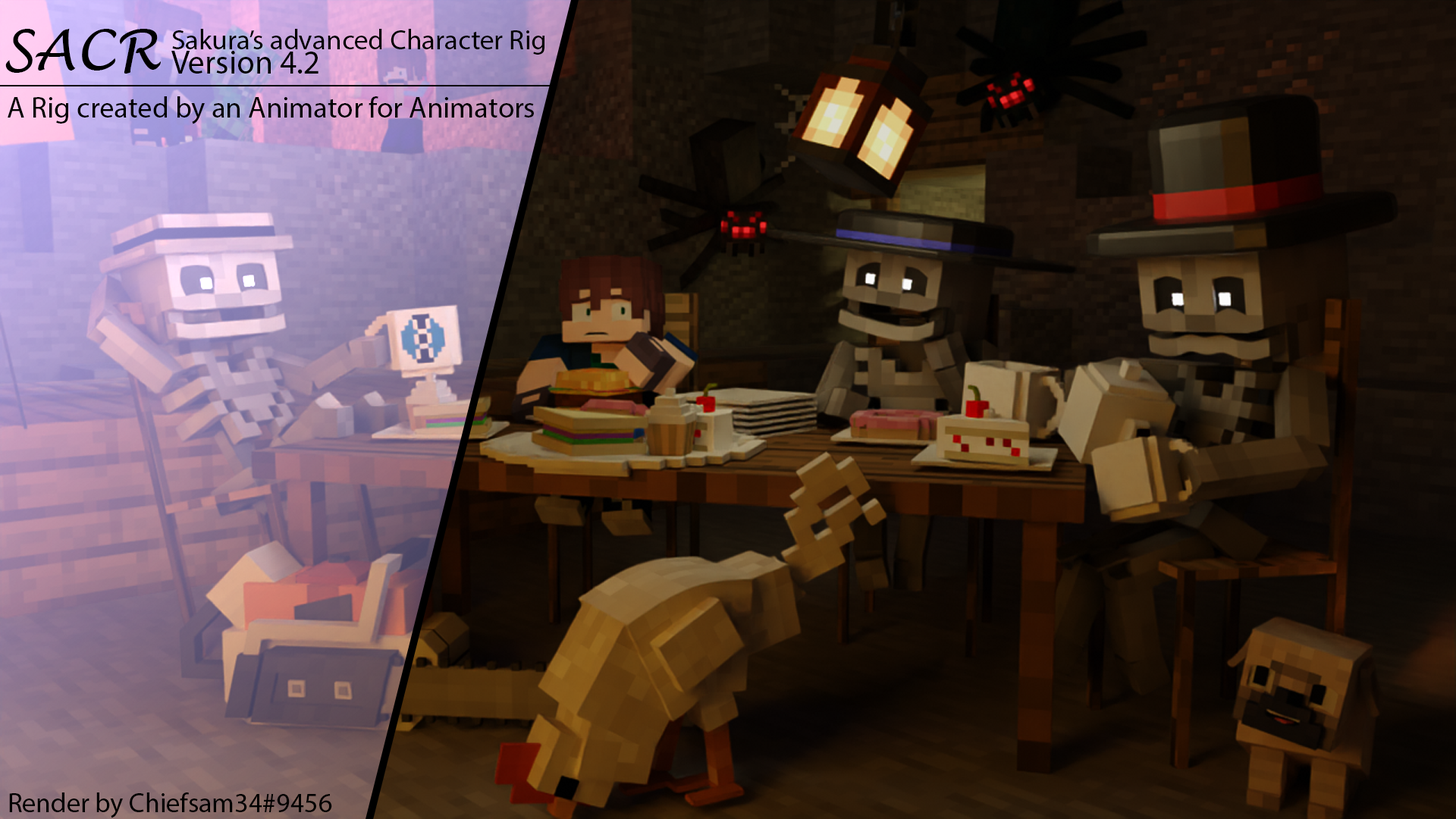
<style>
.page{position:relative;width:1456px;height:819px}
.page>*{position:absolute;margin:0}
.t1{font:55.4px "LucidaHandwriting-Italic";color:#000000}
.t2{font:28.1px "MyriadPro-Regular";color:#000000}
.t3{font:33px "MyriadPro-Regular";color:#000000}
.t4{font:29.3px "MyriadPro-Regular";color:#000000}
.t5{font:27.3px "MyriadPro-Regular";color:#000000}
</style>
<div class="page">
<p class="t1" style="left:5px;top:29px;width:156px;height:45px">SACR</p>
<p class="t2" style="left:172px;top:29px;width:373px;height:26px">Sakura’s advanced Character Rig</p>
<p class="t3" style="left:171px;top:51px;width:147px;height:23px">Version 4.2</p>
<p class="t4" style="left:8px;top:96px;width:526px;height:28px">A Rig created by an Animator for Animators</p>
<p class="t5" style="left:9px;top:792px;width:323px;height:26px">Render by Chiefsam34#9456</p>
</div>
